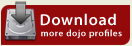
<style>
.page{position:relative;width:132px;height:46px;background:#940a0a}
.page>*{position:absolute;margin:0}
.t1{font:16px "MyriadPro-Semibold";letter-spacing:0.05em;color:#ffffff}
.t2{font:9.3px "MyriadPro-Semibold";letter-spacing:0.05em;color:#ffffff}
</style>
<div class="page">
<p class="t1" style="left:40px;top:13px;width:76px;height:13px">Download</p>
<p class="t2" style="left:41px;top:29px;width:81px;height:10px">more dojo profiles</p>
</div>
